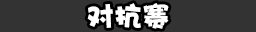
<style>
.page{position:relative;width:256px;height:32px;background:#333333}
.page>*{position:absolute;margin:0}
.t1{font:28px "DFPHaiBaoW12";color:#ffffff}
</style>
<div class="page">
<p class="t1" style="left:87px;top:3px;width:82px;height:26px">对抗赛</p>
</div>
